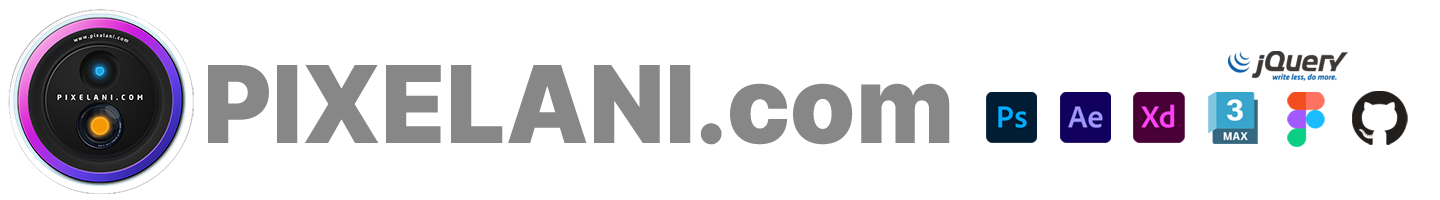
<style>
.page{position:relative;width:1440px;height:200px;background:#ffffff}
.page>*{position:absolute;margin:0}
.t1{font:110px "Pretendard-Black";color:#878787}
</style>
<div class="page">
<p class="t1" style="left:208px;top:65px;width:742px;height:80px">PIXELANI.com</p>
</div>
